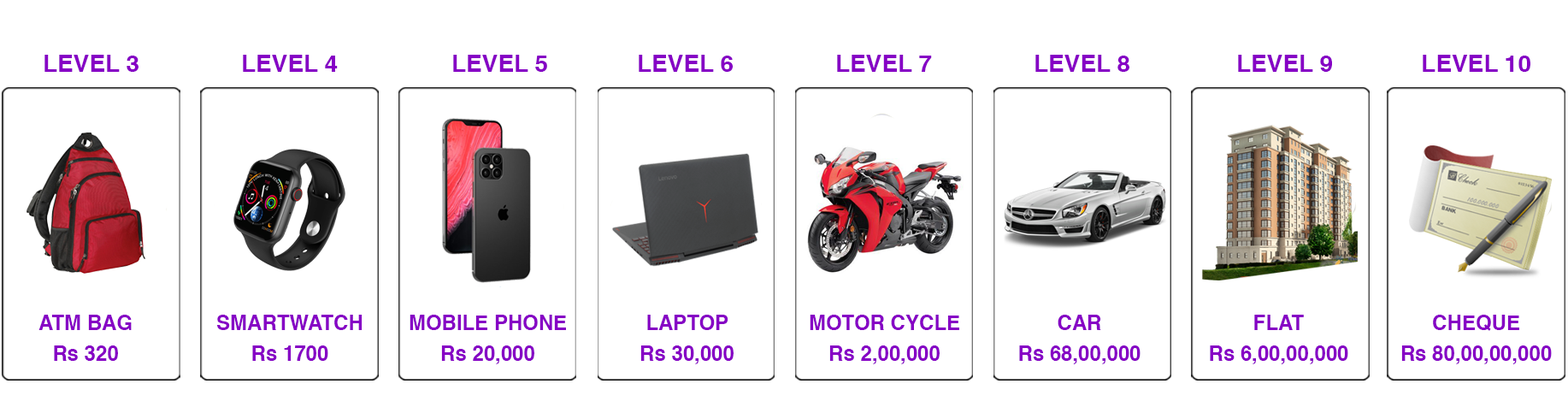
<style>
.page{position:relative;width:1568px;height:419px;background:#ffffff}
.page>*{position:absolute;margin:0}
.t1{font:23.9px "Helvetica-Bold";color:#8600c5}
.t2{font:20.5px/30.8px "Helvetica-Bold";color:#8600c5}
</style>
<div class="page">
<p class="t1" style="left:44px;top:55px;width:95px;height:17px">LEVEL 3</p>
<p class="t1" style="left:243px;top:55px;width:95px;height:17px">LEVEL 4</p>
<p class="t1" style="left:453px;top:55px;width:94px;height:17px">LEVEL 5</p>
<p class="t1" style="left:639px;top:55px;width:95px;height:17px">LEVEL 6</p>
<p class="t1" style="left:837px;top:55px;width:95px;height:17px">LEVEL 7</p>
<p class="t1" style="left:1035px;top:55px;width:94px;height:17px">LEVEL 8</p>
<p class="t1" style="left:1238px;top:55px;width:94px;height:17px">LEVEL 9</p>
<p class="t1" style="left:1423px;top:55px;width:107px;height:17px">LEVEL 10</p>
<p class="t2" style="left:38px;top:315px;width:94px;height:46px;text-align:center">ATM BAG <br>Rs 320</p>
<p class="t2" style="left:217px;top:315px;width:146px;height:46px;text-align:center">SMARTWATCH<br>Rs 1700</p>
<p class="t2" style="left:410px;top:315px;width:156px;height:49px;text-align:center">MOBILE PHONE<br>Rs 20,000</p>
<p class="t2" style="left:640px;top:315px;width:94px;height:49px;text-align:center">LAPTOP<br>Rs 30,000</p>
<p class="t2" style="left:810px;top:315px;width:149px;height:49px;text-align:center">MOTOR CYCLE<br>Rs 2,00,000</p>
<p class="t2" style="left:1019px;top:315px;width:122px;height:49px;text-align:center">CAR<br>Rs 68,00,000</p>
<p class="t2" style="left:1210px;top:315px;width:138px;height:49px;text-align:center">FLAT<br>Rs 6,00,00,000</p>
<p class="t2" style="left:1401px;top:315px;width:151px;height:49px;text-align:center">CHEQUE<br>Rs 80,00,00,000</p>
</div>
